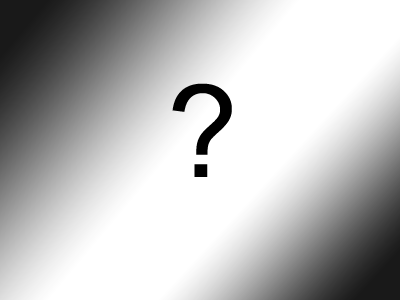
<style>
.page{position:relative;width:400px;height:300px;background:#ffffff}
.page>*{position:absolute;margin:0}
.t1{font:128px "ArialMT";color:#000000}
</style>
<div class="page">
<p class="t1" style="left:172px;top:83px;width:60px;height:94px">?</p>
</div>
